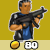
<style>
.page{position:relative;width:50px;height:50px;background:#bda713}
.page>*{position:absolute;margin:0}
.t1{font:10px "MFWenYan_Noncommercial-Regular";letter-spacing:-0.06em;color:#ffffff}
</style>
<div class="page">
<p class="t1" style="left:25px;top:42px;width:13px;height:7px">80</p>
</div>
